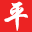
<style>
.page{position:relative;width:32px;height:32px;background:#ec2323}
.page>*{position:absolute;margin:0}
.t1{font:30px "FZXKFW--GB1-0";color:#ffffff;font-weight:bold}
</style>
<div class="page">
<p class="t1" style="left:4px;top:1px;width:24px;height:30px">平</p>
</div>
